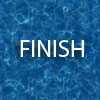
<style>
.page{position:relative;width:100px;height:100px}
.page>*{position:absolute;margin:0}
.t1{font:24px "MyriadPro-Regular";color:#ffffff}
</style>
<div class="page">
<p class="t1" style="left:20px;top:40px;width:64px;height:17px">FINISH</p>
</div>
